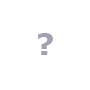
<style>
.page{position:relative;width:90px;height:90px;background:#ffffff}
.page>*{position:absolute;margin:0}
.t1{font:30px "Verdana-Bold";letter-spacing:-0.15em;color:#a3a0b0}
</style>
<div class="page">
<p class="t1" style="left:38px;top:33px;width:15px;height:22px">?</p>
</div>
